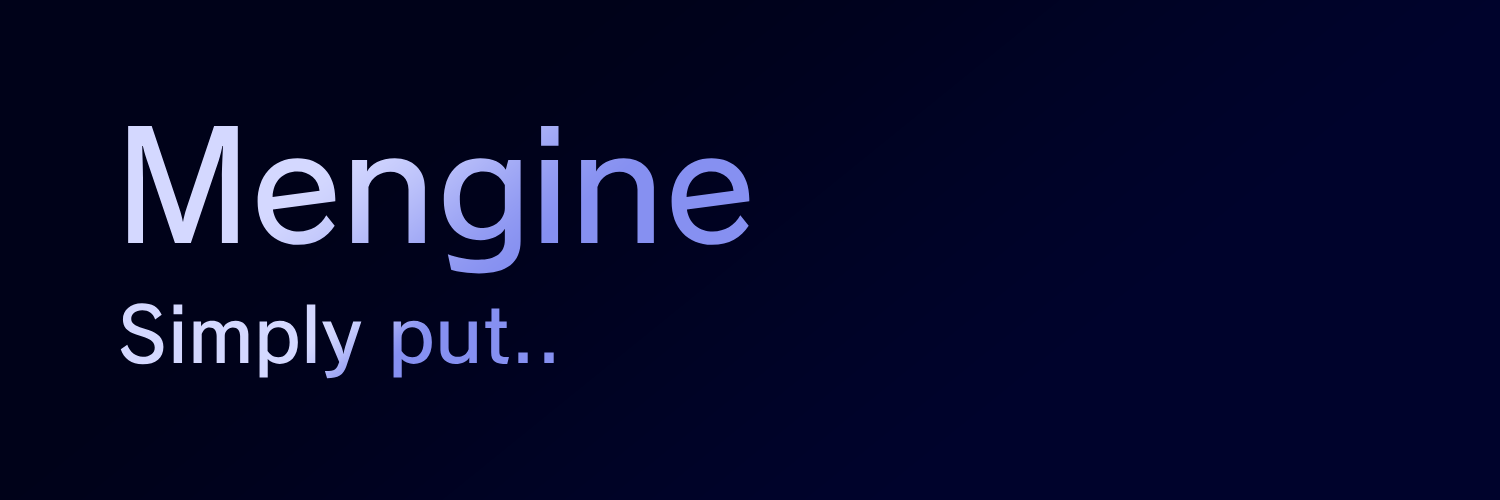
<style>
.page{position:relative;width:1500px;height:500px;background:#00032c}
.page>*{position:absolute;margin:0}
.t1{font:150px "RodinNTLGPro-DB"}
.t2{font:75px "RodinNTLGPro-DB"}
</style>
<div class="page">
<p class="t1" style="left:128px;top:126px;width:622px;height:148px">Mengine</p>
<p class="t2" style="left:120px;top:303px;width:434px;height:76px">Simply put..</p>
</div>
